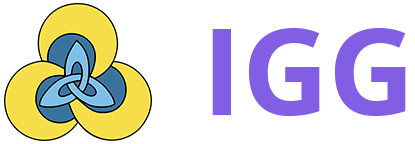
<style>
.page{position:relative;width:415px;height:144px;background:#ffffff}
.page>*{position:absolute;margin:0}
.t1{font:119.7px "OpenSans-Bold";color:#825ee4}
</style>
<div class="page">
<p class="t1" style="left:212px;top:28px;width:194px;height:88px">IGG</p>
</div>
